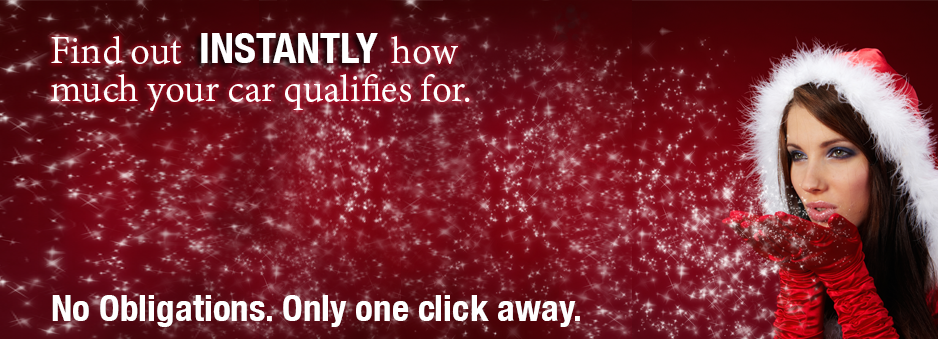
<style>
.page{position:relative;width:938px;height:339px}
.page>*{position:absolute;margin:0}
.t1{font:41.7px/37.5px "AdobeGurmukhi-Regular";color:#ffffff}
.t2{font:41.7px "HelveticaNeue-CondensedBold";color:#ffffff}
.t3{font:37.2px "HelveticaNeue-CondensedBold";color:#ffffff}
</style>
<div class="page">
<p class="t1" style="left:51px;top:36px;width:419px;height:75px">Find out         how<br>much your car qualifies for.</p>
<p class="t2" style="left:201px;top:33px;width:177px;height:30px">INSTANTLY</p>
<p class="t3" style="left:52px;top:295px;width:528px;height:32px">No Obligations. Only one click away.</p>
</div>
